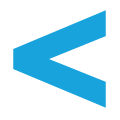
<style>
.page{position:relative;width:120px;height:120px;background:#ffffff}
.page>*{position:absolute;margin:0}
.t1{font:197.4px "Impact";color:#19a4dd}
</style>
<div class="page">
<p class="t1" style="left:13px;top:10px;width:93px;height:98px">&lt;</p>
</div>
